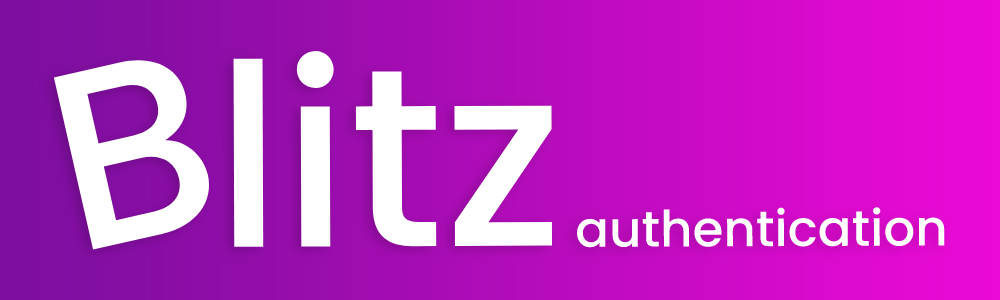
<style>
.page{position:relative;width:1000px;height:300px}
.page>*{position:absolute;margin:0}
.t1{font:254px "Poppins-Medium";color:#ffffff}
.t2{font:50px "Poppins-Medium";color:#ffffff}
</style>
<div class="page">
<p class="t1" style="left:53px;top:54px;width:161px;height:196px;rotate:-13deg">B</p>
<p class="t1" style="left:233px;top:51px;width:319px;height:196px">litz</p>
<p class="t2" style="left:576px;top:207px;width:369px;height:41px">authentication</p>
</div>
